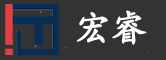
<style>
.page{position:relative;width:166px;height:60px;background:#333333}
.page>*{position:absolute;margin:0}
.t1{font:36px "KaiTi";color:#ffffff;font-weight:bold}
</style>
<div class="page">
<p class="t1" style="left:76px;top:10px;width:71px;height:35px">宏睿</p>
</div>
